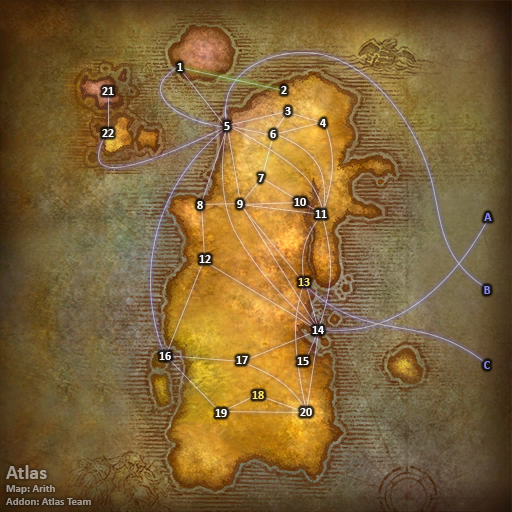
<style>
.page{position:relative;width:512px;height:512px}
.page>*{position:absolute;margin:0}
.t1{font:12px "Calibri-Bold";color:#ffffff}
.t2{font:12px "Calibri-Bold";color:#8788ee}
.t3{font:12px "Calibri-Bold";color:#fee570}
.t4{font:11px "Calibri-Bold";color:#a49b92}
.t5{font:20px "Calibri-Bold";color:#a49b92}
</style>
<div class="page">
<p class="t1" style="left:177px;top:63px;width:6px;height:8px">1</p>
<p class="t1" style="left:102px;top:87px;width:12px;height:8px">21</p>
<p class="t1" style="left:281px;top:86px;width:6px;height:8px">2</p>
<p class="t1" style="left:285px;top:107px;width:6px;height:8px">3</p>
<p class="t1" style="left:224px;top:122px;width:6px;height:8px">5</p>
<p class="t1" style="left:320px;top:119px;width:6px;height:8px">4</p>
<p class="t1" style="left:102px;top:129px;width:12px;height:8px">22</p>
<p class="t1" style="left:270px;top:130px;width:6px;height:8px">6</p>
<p class="t1" style="left:258px;top:174px;width:6px;height:8px">7</p>
<p class="t1" style="left:294px;top:198px;width:12px;height:8px">10</p>
<p class="t1" style="left:197px;top:201px;width:6px;height:8px">8</p>
<p class="t1" style="left:237px;top:200px;width:6px;height:8px">9</p>
<p class="t1" style="left:315px;top:210px;width:12px;height:8px">11</p>
<p class="t2" style="left:484px;top:213px;width:8px;height:8px">A</p>
<p class="t1" style="left:199px;top:255px;width:12px;height:8px">12</p>
<p class="t3" style="left:298px;top:278px;width:12px;height:8px">13</p>
<p class="t2" style="left:484px;top:286px;width:7px;height:8px">B</p>
<p class="t1" style="left:312px;top:326px;width:12px;height:8px">14</p>
<p class="t1" style="left:159px;top:352px;width:12px;height:8px">16</p>
<p class="t1" style="left:236px;top:356px;width:12px;height:8px">17</p>
<p class="t1" style="left:297px;top:357px;width:12px;height:8px">15</p>
<p class="t2" style="left:484px;top:361px;width:6px;height:8px">C</p>
<p class="t3" style="left:252px;top:391px;width:12px;height:8px">18</p>
<p class="t1" style="left:215px;top:409px;width:12px;height:8px">19</p>
<p class="t1" style="left:300px;top:408px;width:12px;height:8px">20</p>
<p class="t4" style="left:6px;top:465px;width:85px;height:40px"><span class="t5">Atlas<br></span>Map: Arith<br>Addon: Atlas Team</p>
</div>
